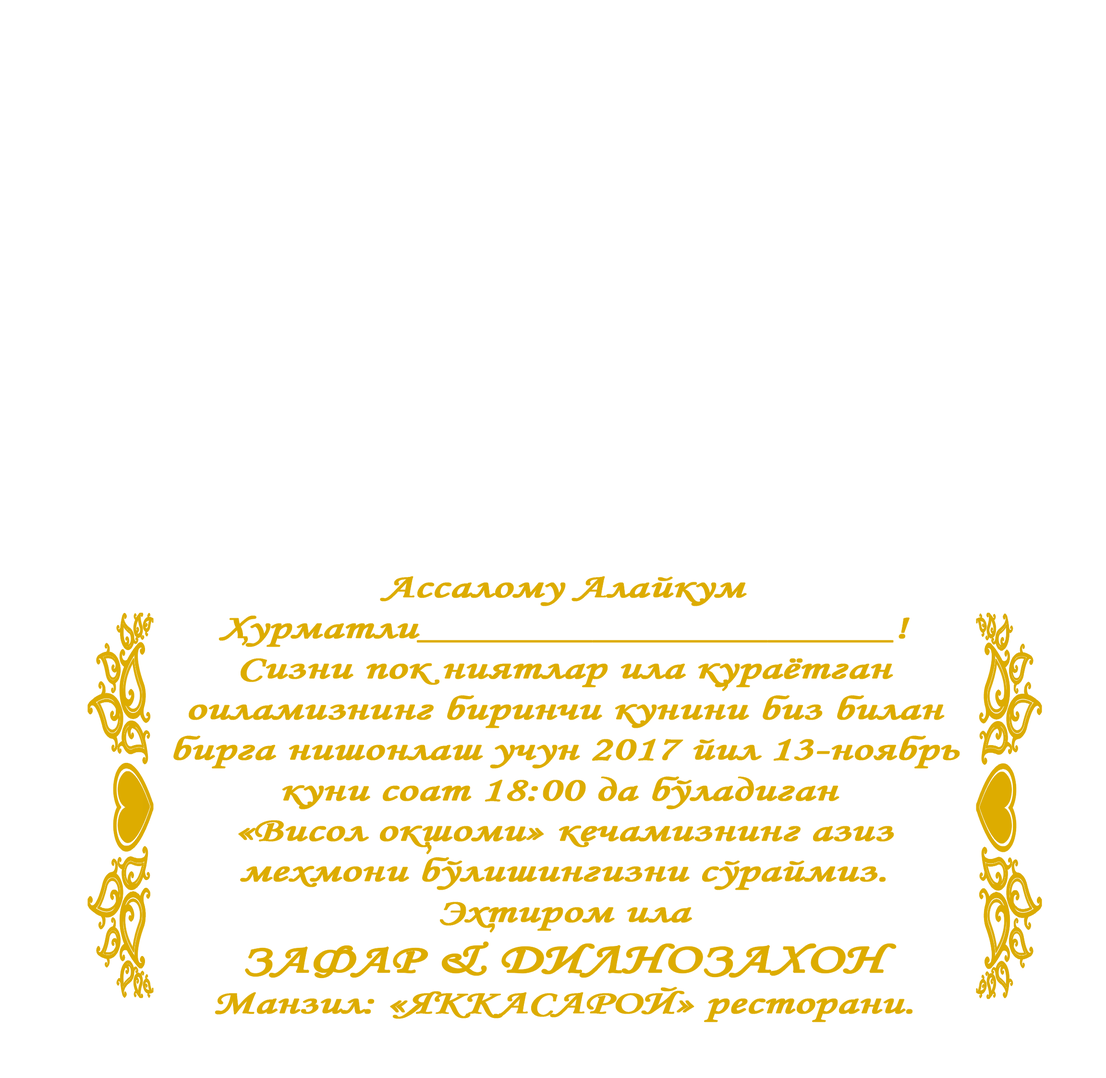
<style>
.page{position:relative;width:1106px;height:1078px;background:#ffffff}
.page>*{position:absolute;margin:0}
.t1{font:33.8px "MonotypeCorsiva";color:#ddac00;font-weight:bold;scale:1.41 1}
.t2{font:39.6px "MonotypeCorsiva";color:#ddac00;font-weight:bold;scale:1.41 1}
.t3{font:42.1px "MonotypeCorsiva";color:#ddac00;font-weight:bold;scale:1.41 1}
.t4{font:31.2px "MonotypeCorsiva";color:#ddac00;font-weight:bold;scale:0.97 1}
</style>
<div class="page">
<p class="t1" style="left:173px;top:576px;width:787px;height:446px;text-align:center">Ассалому Алайкум<br>Хурматли___________________!<br>Сизни пок ниятлар ила кураётган<br>оиламизнинг биринчи кунини биз билан<br>бирга нишонлаш учун 2017 йил 13-ноябрь<br>куни соат 18:00 да бўладиган <br>«Висол окшоми» кечамизнинг азиз<br>мехмони бўлишингизни сўраймиз.<br>Эхтиром ила<br><span class="t2">ЗАФАР</span><span class="t3"> &amp; ДИЛНОЗАХОН<br></span>Манзил: «ЯККАСАРОЙ» реcторани.</p>
<p class="t4" style="left:242px;top:637px;width:6px;height:8px">,</p>
<p class="t4" style="left:722px;top:683px;width:6px;height:8px">,</p>
<p class="t4" style="left:427px;top:845px;width:4px;height:9px;rotate:-9deg">,</p>
<p class="t4" style="left:490px;top:923px;width:5px;height:9px;rotate:-9deg">,</p>
</div>
